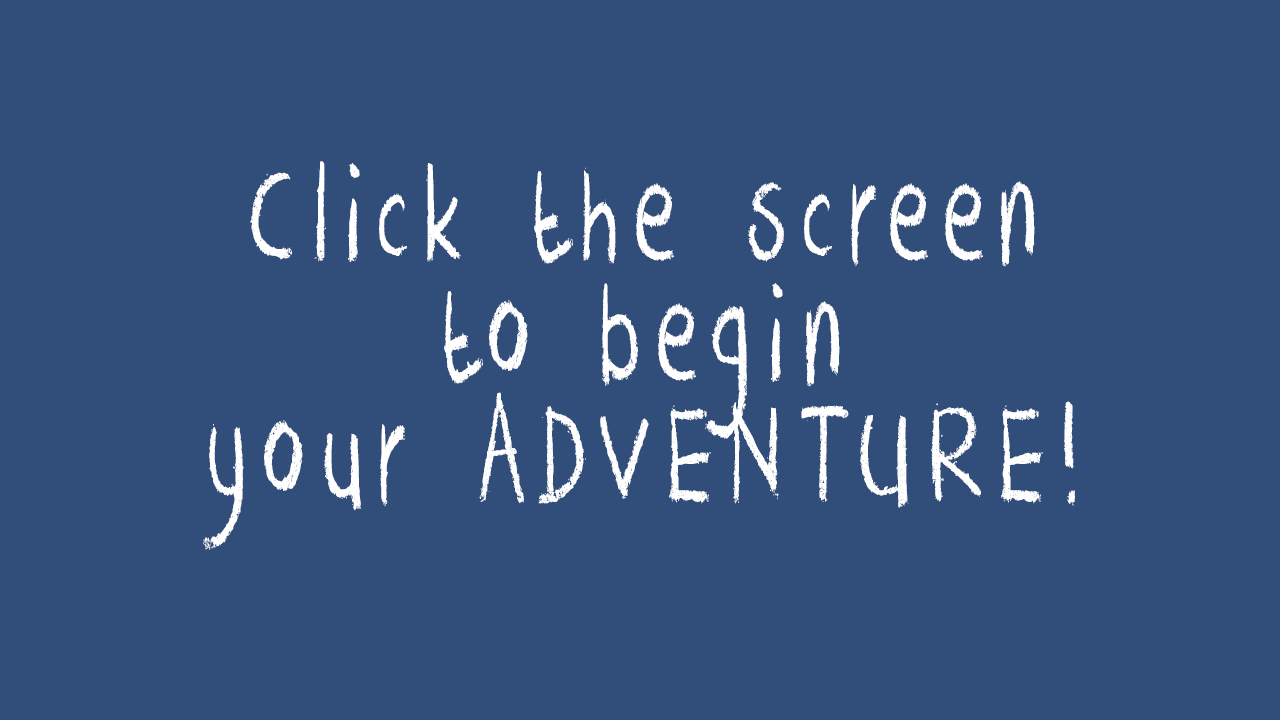
<style>
.page{position:relative;width:1280px;height:720px;background:#314d79}
.page>*{position:absolute;margin:0}
.t1{font:157px "DKCrayonCrumble";letter-spacing:0.159em;color:#ffffff;scale:0.64 1}
</style>
<div class="page">
<p class="t1" style="left:203px;top:161px;width:872px;height:389px;text-align:center">Click the screen <br>to begin <br>your ADVENTURE!</p>
</div>
